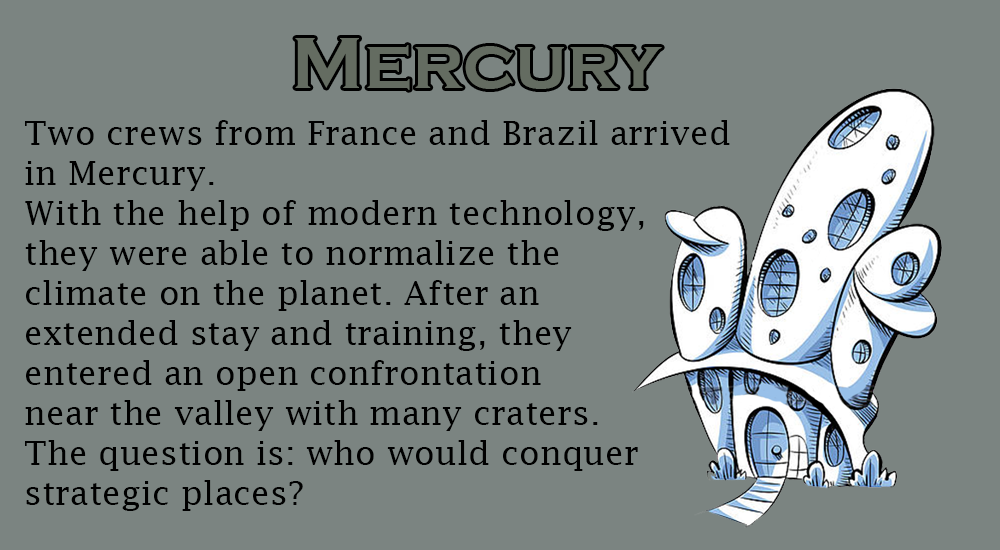
<style>
.page{position:relative;width:1000px;height:550px;background:#7b8481}
.page>*{position:absolute;margin:0}
.t1{font:33.3px "LucidaFax";color:#000000}
</style>
<div class="page">
<p class="t1" style="left:25px;top:120px;width:705px;height:391px">Two crews from France and Brazil arrived<br>in Mercury. <br>With the help of modern technology, <br>they were able to normalize the<br>climate on the planet. After an<br>extended stay and training, they <br>entered an open confrontation<br>near the valley with many craters.<br>The question is: who would conquer<br>strategic places?</p>
</div>
